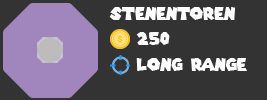
<style>
.page{position:relative;width:267px;height:100px;background:#333333}
.page>*{position:absolute;margin:0}
.t1{font:16.7px "SuperMarioGalaxy";color:#ffffff}
</style>
<div class="page">
<p class="t1" style="left:109px;top:7px;width:127px;height:13px">stenentoren</p>
<p class="t1" style="left:136px;top:32px;width:34px;height:13px">250</p>
<p class="t1" style="left:136px;top:58px;width:111px;height:13px">long range</p>
</div>
